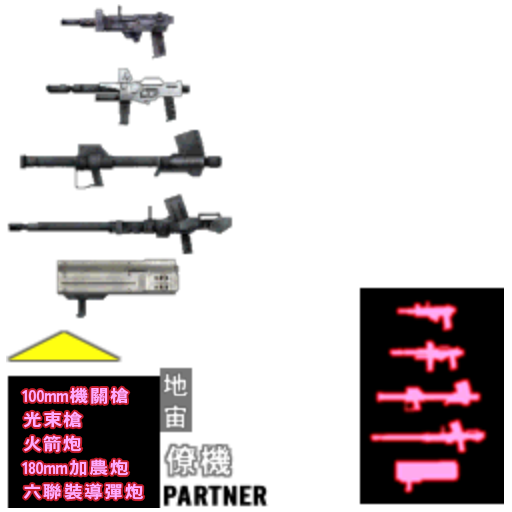
<style>
.page{position:relative;width:512px;height:512px;background:#ffffff}
.page>*{position:absolute;margin:0}
.t1{font:16.3px "HeiseiKakuGoStd-W7";letter-spacing:-0.01em;color:#ffaaff;scale:0.81 1}
.t2{font:16.3px "HeiseiKakuGoStd-W7";letter-spacing:0.1em;color:#ffaaff;scale:0.81 1}
.t3{font:17px "HeiseiKakuGoStd-W7";letter-spacing:0.1em;color:#ffaaff;scale:1.09 1}
</style>
<div class="page">
<p class="t1" style="left:22px;top:387px;width:107px;height:17px">100m<span class="t2">m</span><span class="t3">機關槍</span></p>
<p class="t3" style="left:24px;top:411px;width:58px;height:17px">光束槍</p>
<p class="t3" style="left:24px;top:435px;width:58px;height:17px">火箭炮</p>
<p class="t1" style="left:22px;top:459px;width:107px;height:17px">180m<span class="t2">m</span><span class="t3">加農炮</span></p>
<p class="t3" style="left:24px;top:483px;width:120px;height:17px">六聯裝導彈炮</p>
</div>
